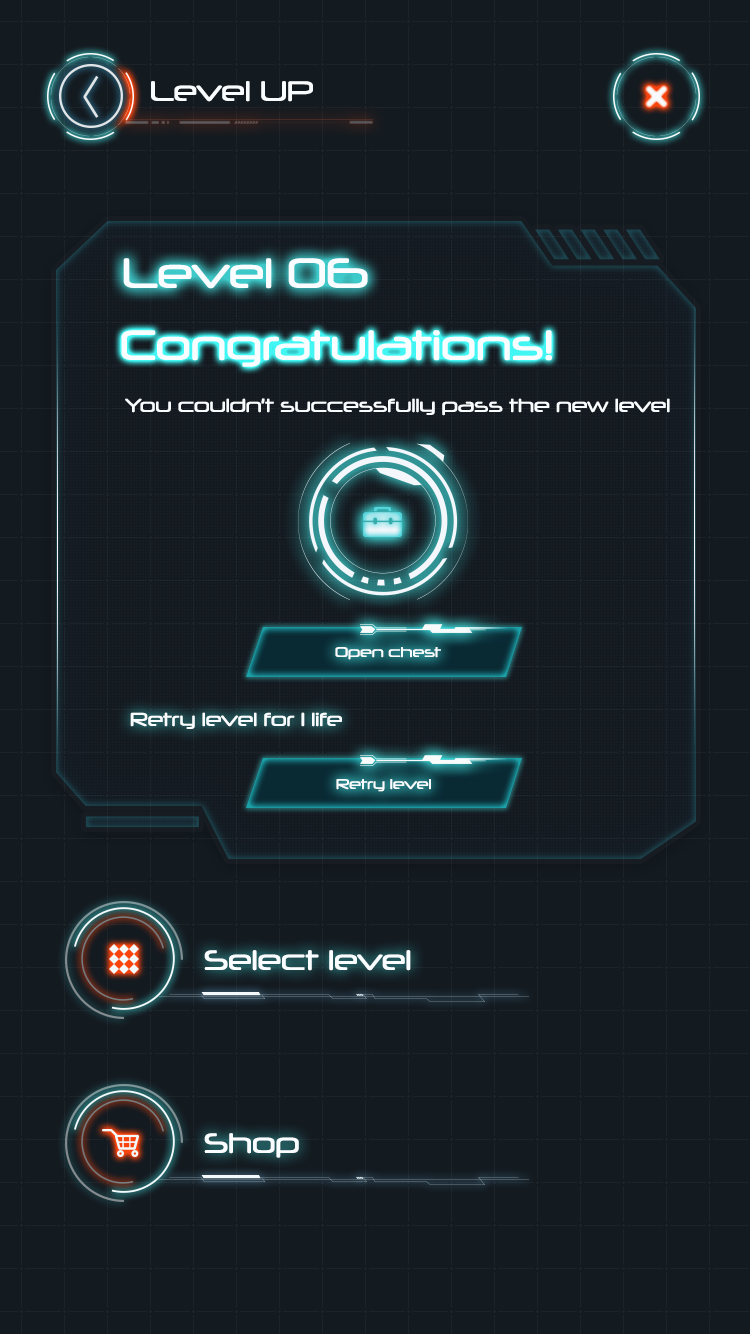
<style>
.page{position:relative;width:750px;height:1334px;background:#131a20}
.page>*{position:absolute;margin:0}
.t1{font:27.2px "Neuropol-Regular";color:#fafdff}
.t2{font:40.8px "Neuropol-Regular";color:#fafdff}
.t3{font:18.1px "Neuropol-Regular";color:#fafdff}
.t4{font:13.6px "Neuropol-Regular";color:#fafdff}
</style>
<div class="page">
<p class="t1" style="left:151px;top:81px;width:162px;height:21px">Level UP</p>
<p class="t2" style="left:123px;top:258px;width:245px;height:31px">Level 06</p>
<p class="t2" style="left:121px;top:330px;width:431px;height:37px">Congratulations!</p>
<p class="t3" style="left:125px;top:398px;width:545px;height:18px">You couldn’t successfully pass the new level</p>
<p class="t4" style="left:335px;top:647px;width:106px;height:13px">Open chest</p>
<p class="t3" style="left:130px;top:712px;width:212px;height:17px">Retry level for 1 life</p>
<p class="t4" style="left:336px;top:779px;width:95px;height:13px">Retry level</p>
<p class="t1" style="left:204px;top:950px;width:207px;height:21px">Select level</p>
<p class="t1" style="left:204px;top:1133px;width:95px;height:25px">Shop</p>
</div>
